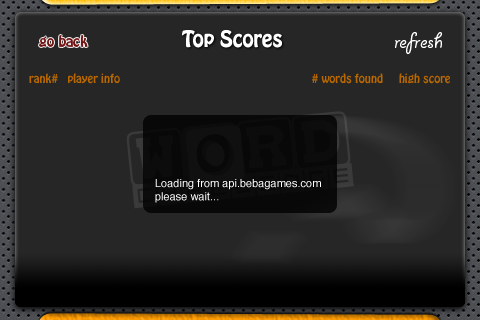
<style>
.page{position:relative;width:480px;height:320px;background:#262626}
.page>*{position:absolute;margin:0}
.t1{font:20px "HoboStd";color:#ffffff}
.t2{font:14px "HoboStd";color:#711414}
.t3{font:24px "GiddyupStd";color:#ffffff}
.t4{font:11px "HoboStd";color:#b96800}
.t5{font:11px "Helvetica";color:#ffffff}
</style>
<div class="page">
<p class="t1" style="left:182px;top:30px;width:100px;height:18px">Top Scores</p>
<p class="t2" style="left:39px;top:35px;width:49px;height:12px">go back</p>
<p class="t3" style="left:395px;top:32px;width:47px;height:22px">refresh</p>
<p class="t4" style="left:29px;top:73px;width:421px;height:11px">rank#   player info                                                            # words found     high score</p>
<p class="t5" style="left:155px;top:179px;width:166px;height:24px">Loading from api.bebagames.com<br>please wait...</p>
</div>
